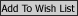
<style>
.page{position:relative;width:78px;height:16px;background:#cdcdcd}
.page>*{position:absolute;margin:0}
.t1{font:10px "Tahoma";color:#000000}
</style>
<div class="page">
<p class="t1" style="left:1px;top:4px;width:74px;height:8px">Add To Wish List</p>
</div>
